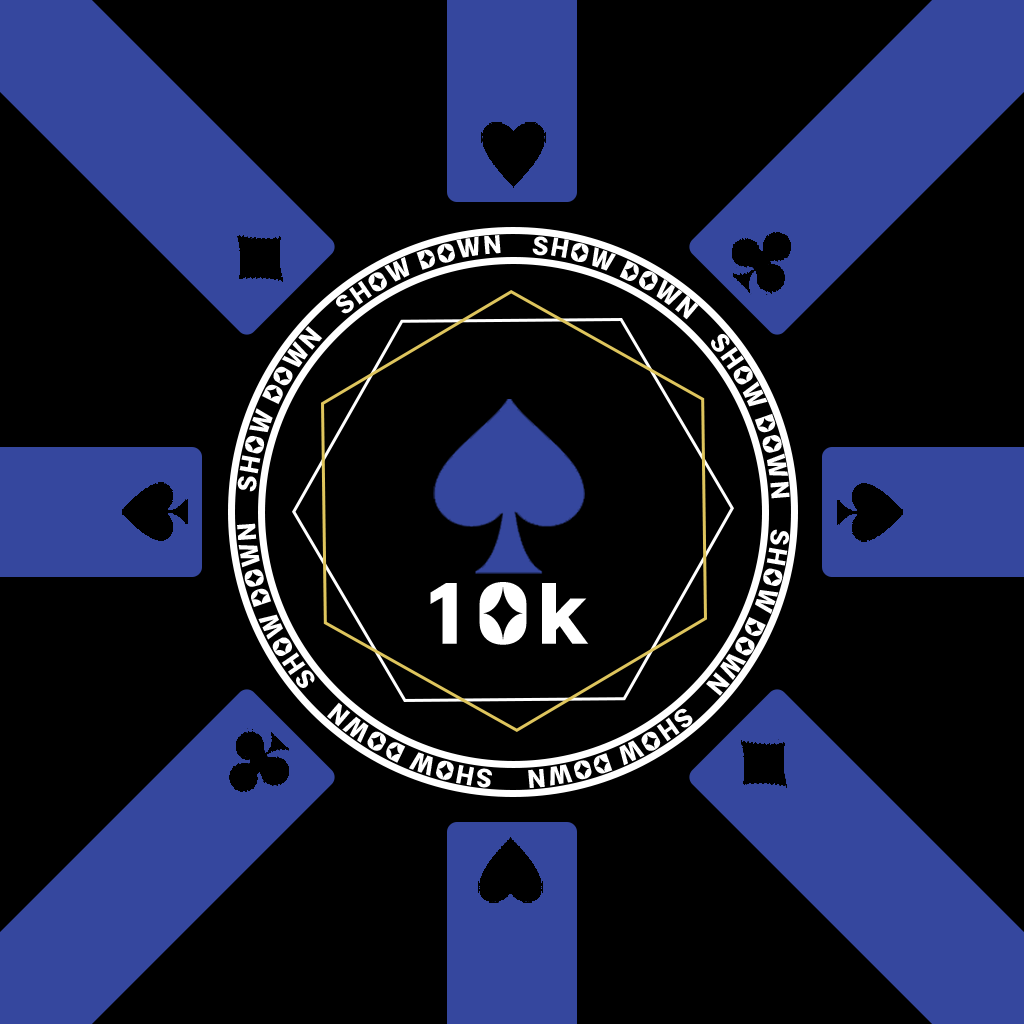
<style>
.page{position:relative;width:1024px;height:1024px;background:#000000}
.page>*{position:absolute;margin:0}
.t1{font:21.6px/7.2px "PyeongChangPeace-Bold";letter-spacing:0.085em;color:#ffffff}
.t2{font:72px "PyeongChangPeace-Bold";letter-spacing:0.12em;color:#ffffff}
</style>
<div class="page">
<p class="t1" style="left:237px;top:235px;width:553px;height:554px;text-align:center">SHOW DOWN    SHOW DOWN    SHOW DOWN    SHOW DOWN    SHOW DOWN    SHOW DOWN    SHOW DOWN    SHOW DOWN</p>
<p class="t2" style="left:430px;top:582px;width:159px;height:63px">10k</p>
</div>
